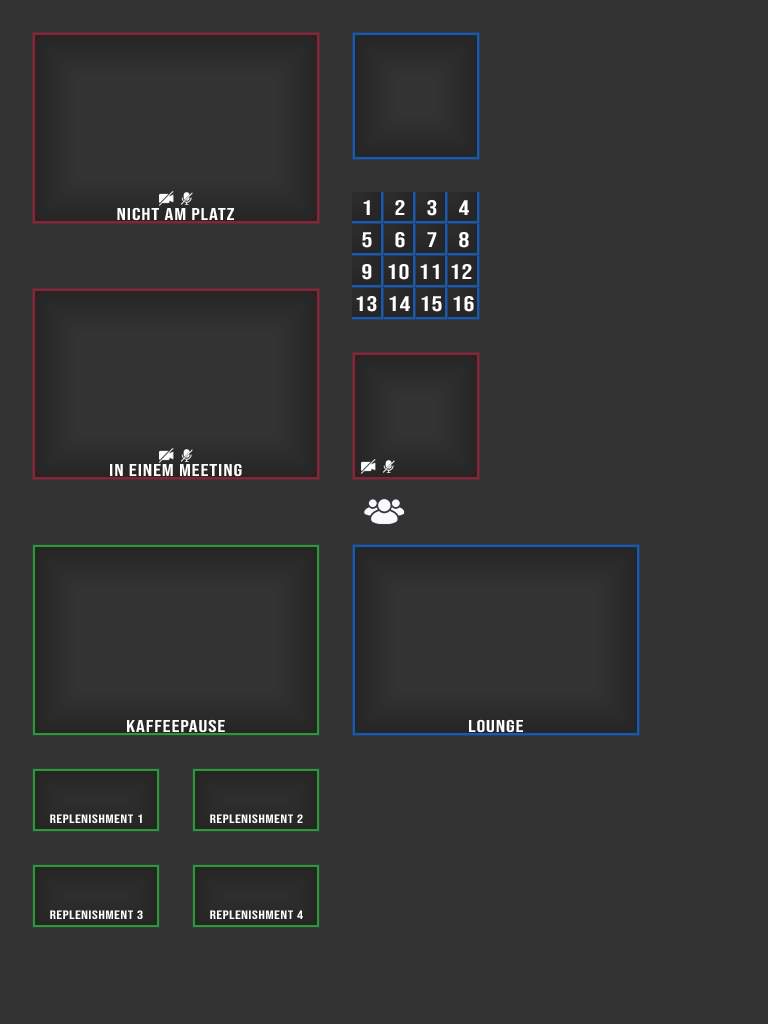
<style>
.page{position:relative;width:768px;height:1024px;background:#333333}
.page>*{position:absolute;margin:0}
.t1{font:17.1px "BebasNeue-Regular";letter-spacing:0.04em;color:#ffffff;text-transform:uppercase;scale:1.28 1}
.t2{font:21px "BebasNeue-Regular";letter-spacing:0.04em;color:#ffffff;text-transform:uppercase;scale:1.28 1}
.t3{font:12px "BebasNeue-Regular";letter-spacing:0.04em;color:#ffffff;text-transform:uppercase;scale:1.28 1}
</style>
<div class="page">
<p class="t1" style="left:117px;top:207px;width:117px;height:14px">Nicht am Platz</p>
<p class="t2" style="left:363px;top:200px;width:7px;height:15px">1</p>
<p class="t2" style="left:395px;top:200px;width:10px;height:15px">2</p>
<p class="t2" style="left:427px;top:200px;width:10px;height:16px">3</p>
<p class="t2" style="left:459px;top:200px;width:10px;height:15px">4</p>
<p class="t2" style="left:362px;top:232px;width:10px;height:16px">5</p>
<p class="t2" style="left:395px;top:232px;width:10px;height:16px">6</p>
<p class="t2" style="left:427px;top:232px;width:10px;height:15px">7</p>
<p class="t2" style="left:459px;top:232px;width:10px;height:16px">8</p>
<p class="t2" style="left:362px;top:264px;width:10px;height:16px">9</p>
<p class="t2" style="left:388px;top:264px;width:21px;height:16px">10</p>
<p class="t2" style="left:420px;top:264px;width:19px;height:15px">11</p>
<p class="t2" style="left:451px;top:264px;width:21px;height:15px">12</p>
<p class="t2" style="left:356px;top:296px;width:21px;height:16px">13</p>
<p class="t2" style="left:389px;top:296px;width:21px;height:15px">14</p>
<p class="t2" style="left:421px;top:296px;width:21px;height:16px">15</p>
<p class="t2" style="left:453px;top:296px;width:21px;height:16px">16</p>
<p class="t1" style="left:110px;top:463px;width:132px;height:14px">In einem Meeting</p>
<p class="t1" style="left:127px;top:719px;width:98px;height:14px">Kaffeepause</p>
<p class="t1" style="left:469px;top:719px;width:54px;height:14px">Lounge</p>
<p class="t3" style="left:50px;top:814px;width:92px;height:9px">Replenishment 1</p>
<p class="t3" style="left:210px;top:814px;width:93px;height:9px">Replenishment 2</p>
<p class="t3" style="left:50px;top:910px;width:93px;height:9px">Replenishment 3</p>
<p class="t3" style="left:210px;top:910px;width:93px;height:9px">Replenishment 4</p>
</div>
